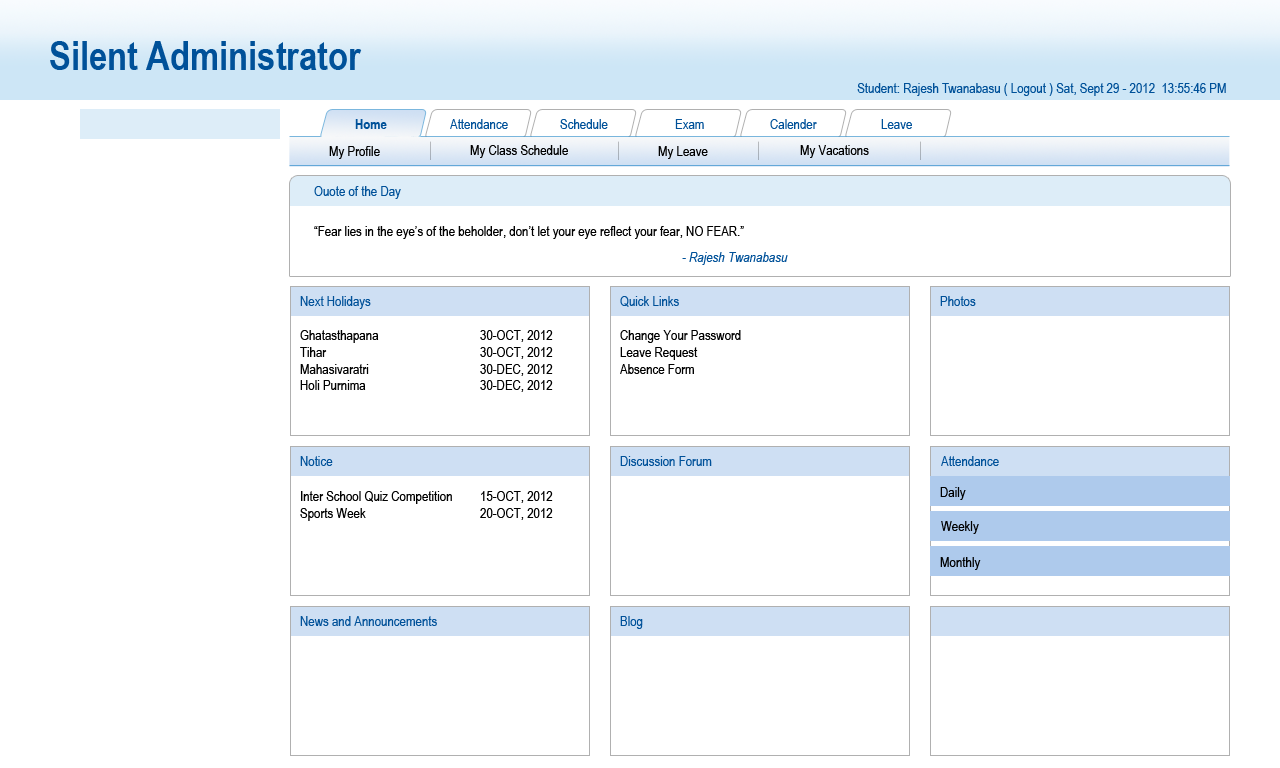
<style>
.page{position:relative;width:1280px;height:768px;background:#ffffff}
.page>*{position:absolute;margin:0}
.t1{font:40px "ArialNarrow-Bold";color:#005199}
.t2{font:14px "ArialNarrow";color:#005199}
.t3{font:14px "ArialNarrow-Bold";color:#005199}
.t4{font:14px "ArialNarrow";color:#000000}
.t5{font:14px "ArialNarrow-Italic";color:#005199}
.t6{font:14px "ArialNarrow";color:#010101}
</style>
<div class="page">
<p class="t1" style="left:50px;top:41px;width:312px;height:29px">Silent Administrator</p>
<p class="t2" style="left:857px;top:83px;width:369px;height:13px">Student: Rajesh Twanabasu ( Logout ) Sat, Sept 29 - 2012  13:55:46 PM</p>
<p class="t3" style="left:355px;top:119px;width:32px;height:10px">Home</p>
<p class="t2" style="left:450px;top:119px;width:58px;height:10px">Attendance</p>
<p class="t2" style="left:560px;top:119px;width:48px;height:10px">Schedule</p>
<p class="t2" style="left:675px;top:119px;width:29px;height:10px">Exam</p>
<p class="t2" style="left:770px;top:119px;width:47px;height:10px">Calender</p>
<p class="t2" style="left:881px;top:119px;width:31px;height:10px">Leave</p>
<p class="t4" style="left:329px;top:146px;width:51px;height:13px">My Profile</p>
<p class="t4" style="left:470px;top:145px;width:98px;height:13px">My Class Schedule</p>
<p class="t4" style="left:658px;top:146px;width:50px;height:13px">My Leave</p>
<p class="t4" style="left:800px;top:145px;width:69px;height:13px">My Vacations</p>
<p class="t2" style="left:314px;top:186px;width:87px;height:13px">Ouote of the Day</p>
<p class="t4" style="left:314px;top:226px;width:430px;height:13px">“Fear lies in the eye’s of the beholder, don’t let your eye reflect your fear, NO FEAR.”</p>
<p class="t5" style="left:682px;top:252px;width:106px;height:13px">- Rajesh Twanabasu</p>
<p class="t2" style="left:300px;top:296px;width:71px;height:13px">Next Holidays</p>
<p class="t2" style="left:620px;top:296px;width:59px;height:11px">Quick Links</p>
<p class="t2" style="left:940px;top:296px;width:36px;height:10px">Photos</p>
<p class="t6" style="left:300px;top:330px;width:253px;height:62px">Ghatasthapana   30-OCT, 2012<br>Tihar     30-OCT, 2012<br>Mahasivaratri    30-DEC, 2012<br>Holi Purnima    30-DEC, 2012</p>
<p class="t4" style="left:620px;top:330px;width:121px;height:44px">Change Your Password<br>Leave Request<br>Absence Form</p>
<p class="t2" style="left:300px;top:456px;width:33px;height:10px">Notice</p>
<p class="t2" style="left:620px;top:456px;width:92px;height:10px">Discussion Forum</p>
<p class="t2" style="left:941px;top:456px;width:58px;height:10px">Attendance</p>
<p class="t4" style="left:300px;top:491px;width:253px;height:30px">Inter School Quiz Competition 15-OCT, 2012<br>Sports Week    20-OCT, 2012</p>
<p class="t4" style="left:940px;top:487px;width:26px;height:13px">Daily</p>
<p class="t4" style="left:941px;top:521px;width:38px;height:13px">Weekly</p>
<p class="t4" style="left:940px;top:557px;width:41px;height:13px">Monthly</p>
<p class="t2" style="left:300px;top:616px;width:137px;height:10px">News and Announcements</p>
<p class="t2" style="left:620px;top:616px;width:23px;height:13px">Blog</p>
</div>
